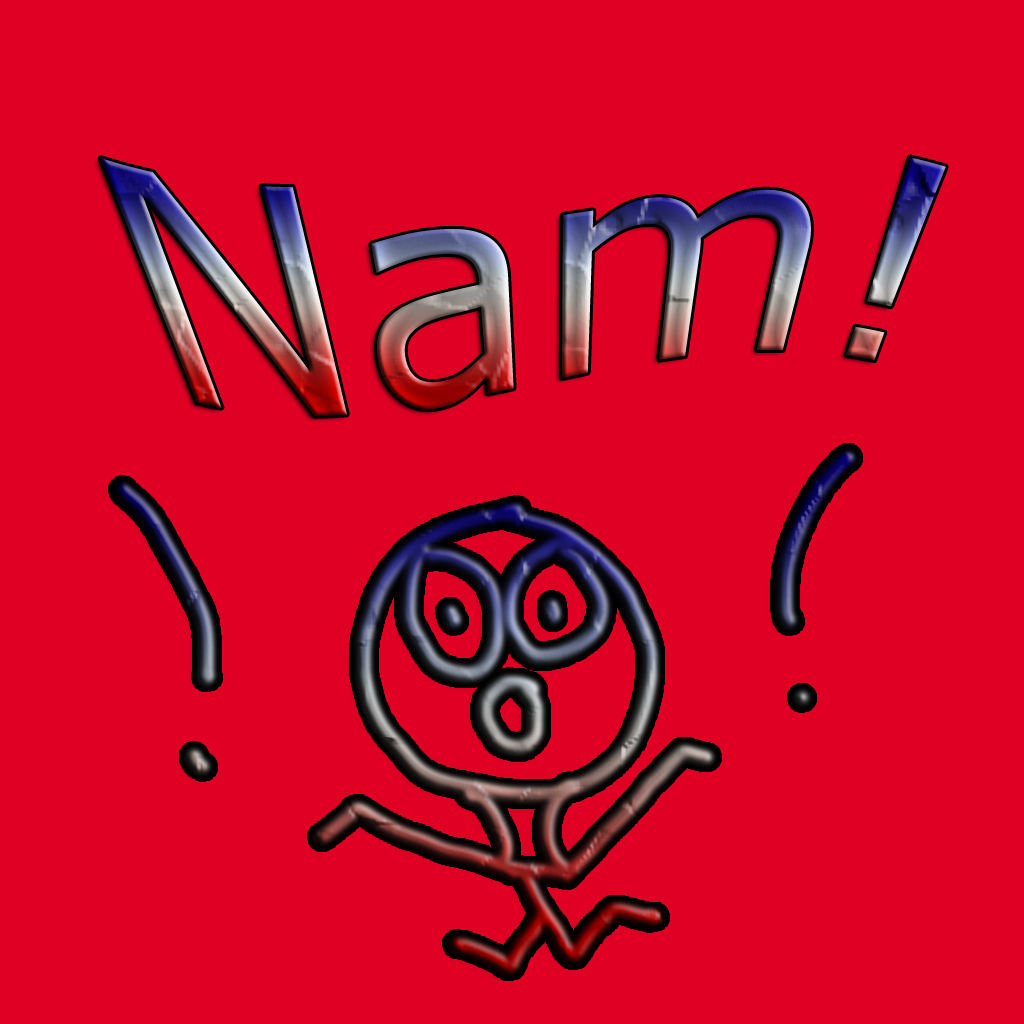
<style>
.page{position:relative;width:1024px;height:1024px;background:#df0024}
.page>*{position:absolute;margin:0}
.t1{font:300px "Verdana"}
</style>
<div class="page">
<p class="t1" style="left:100px;top:157px;width:846px;height:259px">Nam!</p>
</div>
